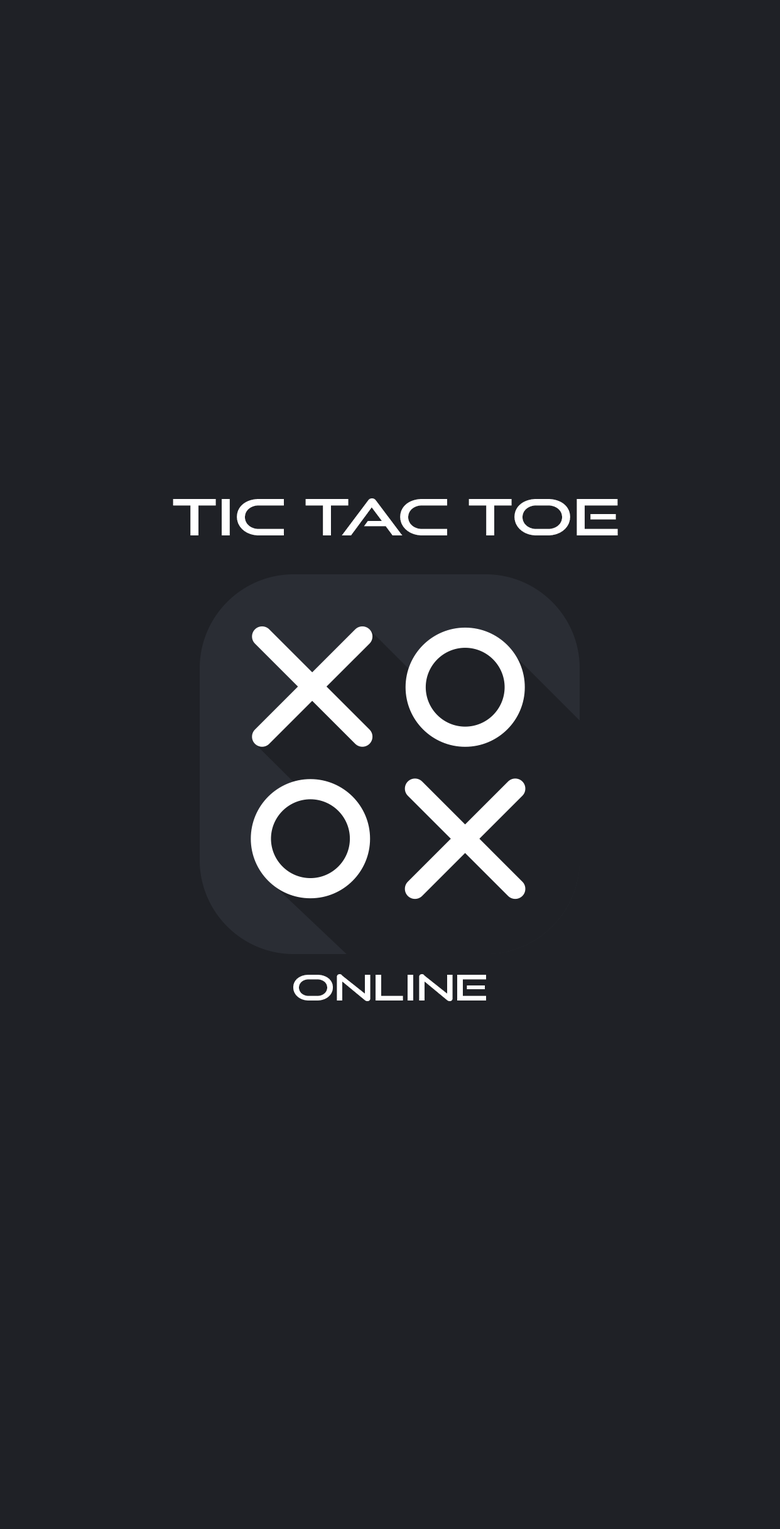
<style>
.page{position:relative;width:780px;height:1529px;background:#1f2126}
.page>*{position:absolute;margin:0}
.t1{font:50.2px "GoodTimesRg-Regular";color:#ffffff;scale:1.25 1}
.t2{font:35.5px "GoodTimesRg-Regular";color:#ffffff;scale:1.25 1}
</style>
<div class="page">
<p class="t1" style="left:173px;top:498px;width:445px;height:38px">TIC TAC TOE</p>
<p class="t2" style="left:293px;top:974px;width:193px;height:27px">ONLINE</p>
</div>
